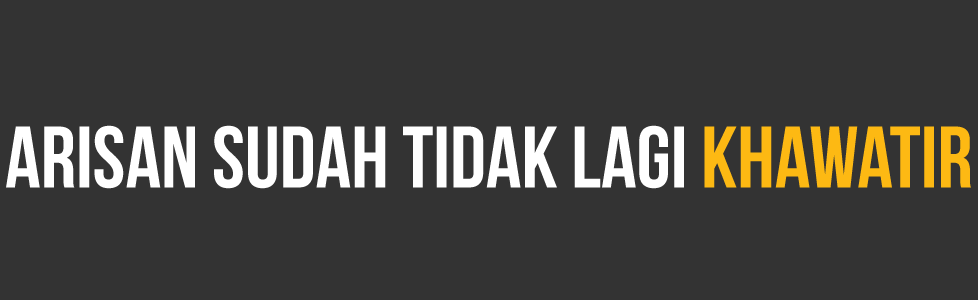
<style>
.page{position:relative;width:978px;height:300px;background:#333333}
.page>*{position:absolute;margin:0}
.t1{font:87.3px "BebasNeue";color:#ffffff}
.t2{font:87.3px "BebasNeue";color:#fdb913}
</style>
<div class="page">
<p class="t1" style="left:6px;top:125px;width:965px;height:64px">arisan sudah tidak lagi <span class="t2">khawatir</span></p>
</div>
